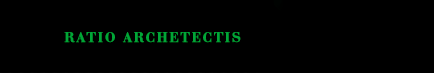
<style>
.page{position:relative;width:434px;height:73px;background:#000000}
.page>*{position:absolute;margin:0}
.t1{font:14px "BauerBodoni-Bold";letter-spacing:0.1em;color:#00a637;font-weight:bold}
</style>
<div class="page">
<p class="t1" style="left:64px;top:32px;width:177px;height:11px">RATIO ARCHETECTIS</p>
</div>
